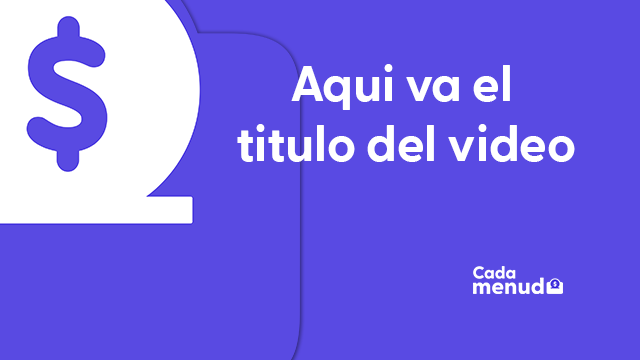
<style>
.page{position:relative;width:640px;height:360px;background:#594ae3}
.page>*{position:absolute;margin:0}
.t1{font:50px "GreycliffCF-Bold";color:#ffffff}
</style>
<div class="page">
<p class="t1" style="left:237px;top:64px;width:338px;height:98px;text-align:center">Aqui va el <br>titulo del video</p>
</div>
